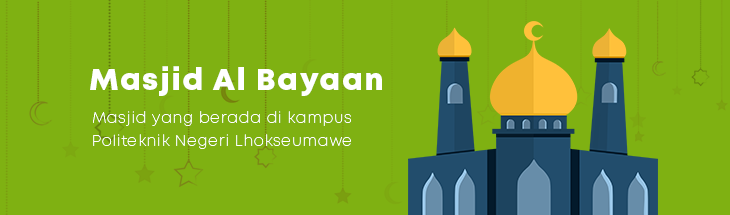
<style>
.page{position:relative;width:730px;height:215px;background:#7fb112}
.page>*{position:absolute;margin:0}
.t1{font:30px "Mont-HeavyDEMO";letter-spacing:0.06em;color:#ffffff}
.t2{font:15px/23.3px "Mont-ExtraLightDEMO";letter-spacing:0.06em;color:#ffffff}
</style>
<div class="page">
<p class="t1" style="left:90px;top:66px;width:292px;height:30px">Masjid Al Bayaan</p>
<p class="t2" style="left:93px;top:111px;width:258px;height:38px">Masjid yang berada di kampus<br>Politeknik Negeri Lhokseumawe</p>
</div>
